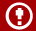
<style>
.page{position:relative;width:36px;height:31px;background:#a40004}
.page>*{position:absolute;margin:0}
.t1{font:24px "Fixedsys";color:#ffffff}
</style>
<div class="page">
<p class="t1" style="left:15px;top:8px;width:9px;height:17px">!</p>
</div>
